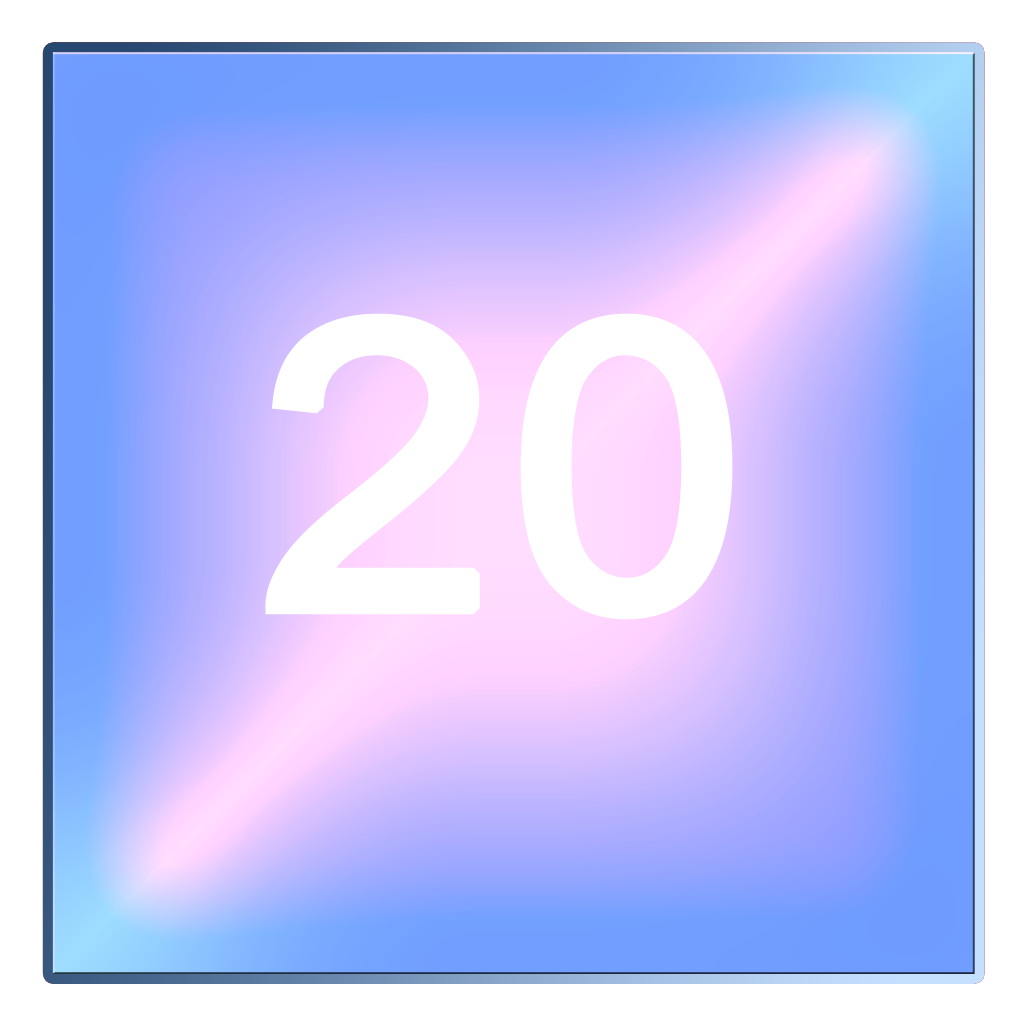
<style>
.page{position:relative;width:1024px;height:1024px;background:#ffffff}
.page>*{position:absolute;margin:0}
.t1{font:400px "ArialNarrow";color:#ffffff;font-weight:bold;scale:1.3 1}
</style>
<div class="page">
<p class="t1" style="left:265px;top:313px;width:468px;height:307px">20</p>
</div>
